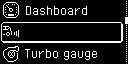
<style>
.page{position:relative;width:128px;height:64px;background:#000000}
.page>*{position:absolute;margin:0}
.t1{font:16px "PixelOperator";color:#ffffff}
</style>
<div class="page">
<p class="t1" style="left:26px;top:6px;width:61px;height:9px">Dashboard</p>
<p class="t1" style="left:25px;top:49px;width:72px;height:11px">Turbo gauge</p>
</div>
